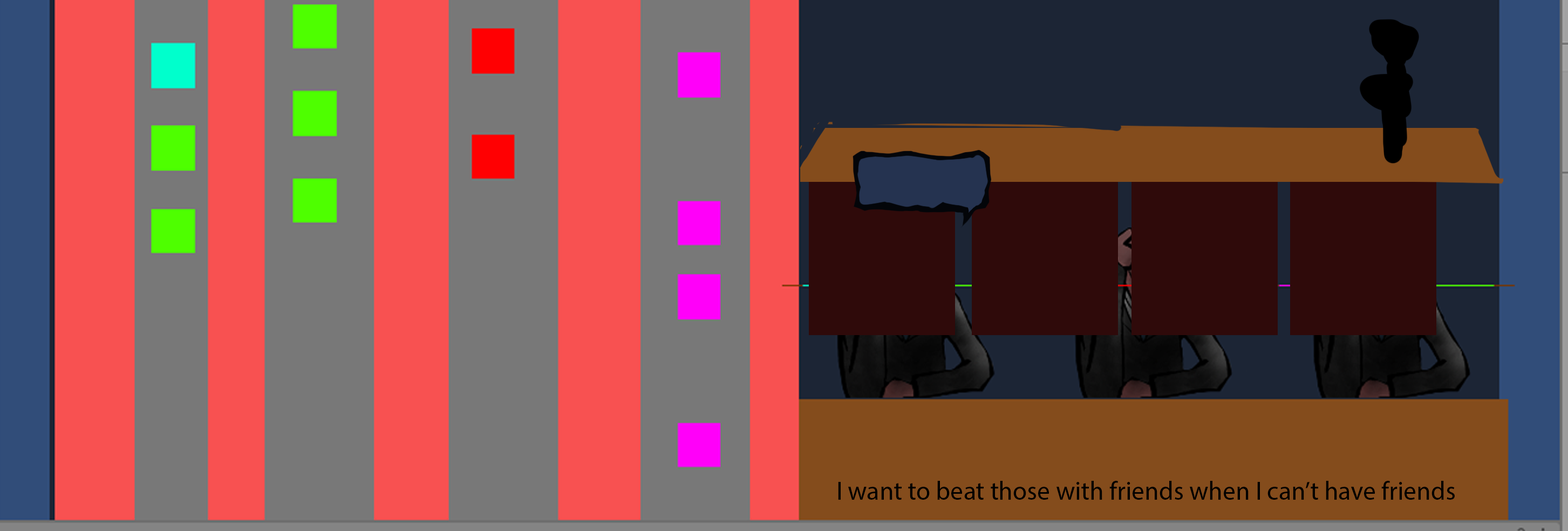
<style>
.page{position:relative;width:1568px;height:531px}
.page>*{position:absolute;margin:0}
.t1{font:25.9px "MyriadPro-Regular";color:#000000}
</style>
<div class="page">
<p class="t1" style="left:838px;top:481px;width:617px;height:19px">I want to beat those with friends when I can’t have friends</p>
</div>
